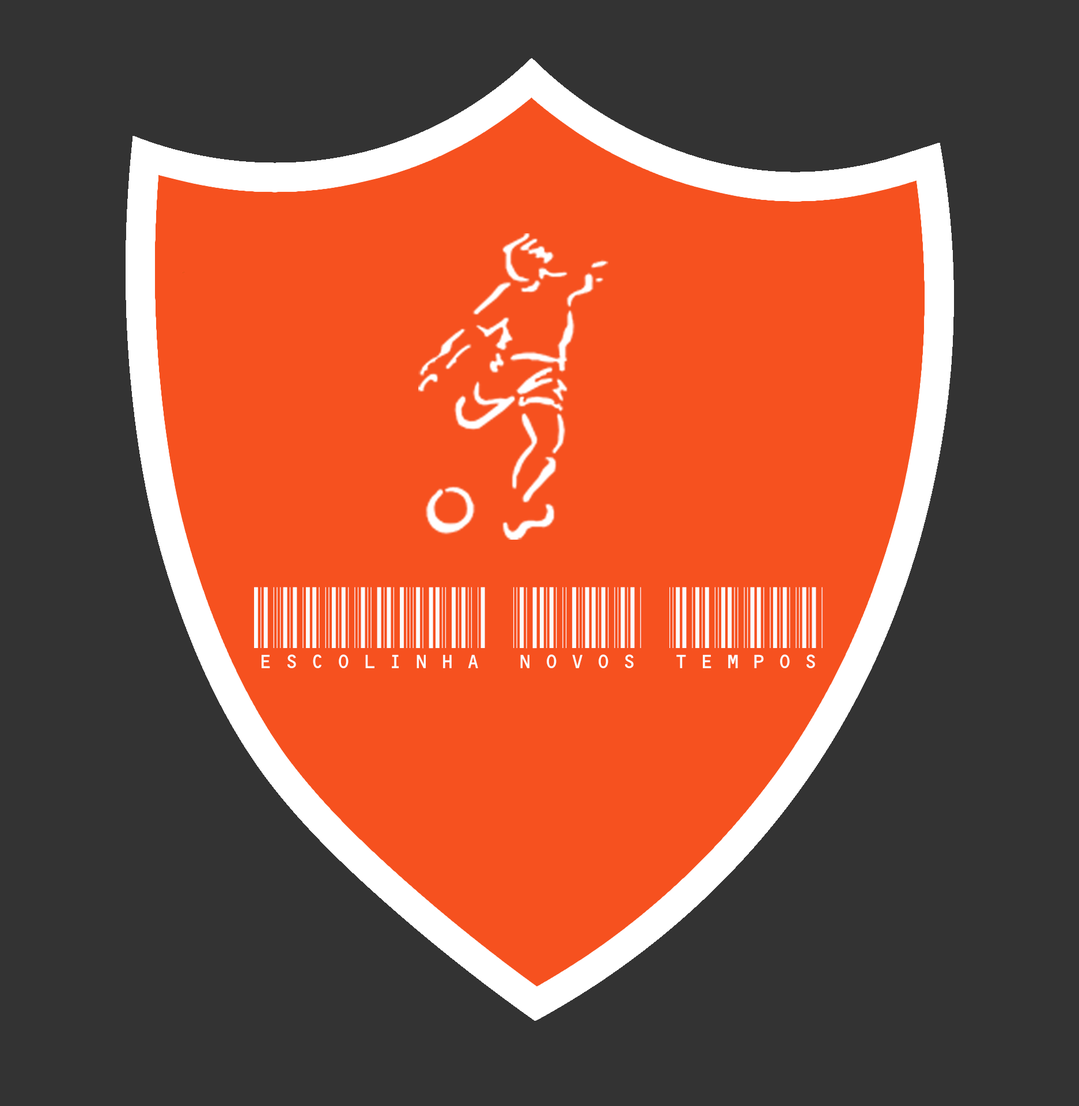
<style>
.page{position:relative;width:1079px;height:1106px;background:#333333}
.page>*{position:absolute;margin:0}
.t1{font:81px "C39HrP24DhTt";color:#fdfbfb}
</style>
<div class="page">
<p class="t1" style="left:254px;top:587px;width:568px;height:81px">ESCOLINHA NOVOS TEMPOS</p>
</div>
